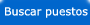
<style>
.page{position:relative;width:90px;height:25px;background:#0066cc}
.page>*{position:absolute;margin:0}
.t1{font:11px "Verdana";color:#ffffff}
</style>
<div class="page">
<p class="t1" style="left:5px;top:7px;width:83px;height:11px">Buscar puestos</p>
</div>
